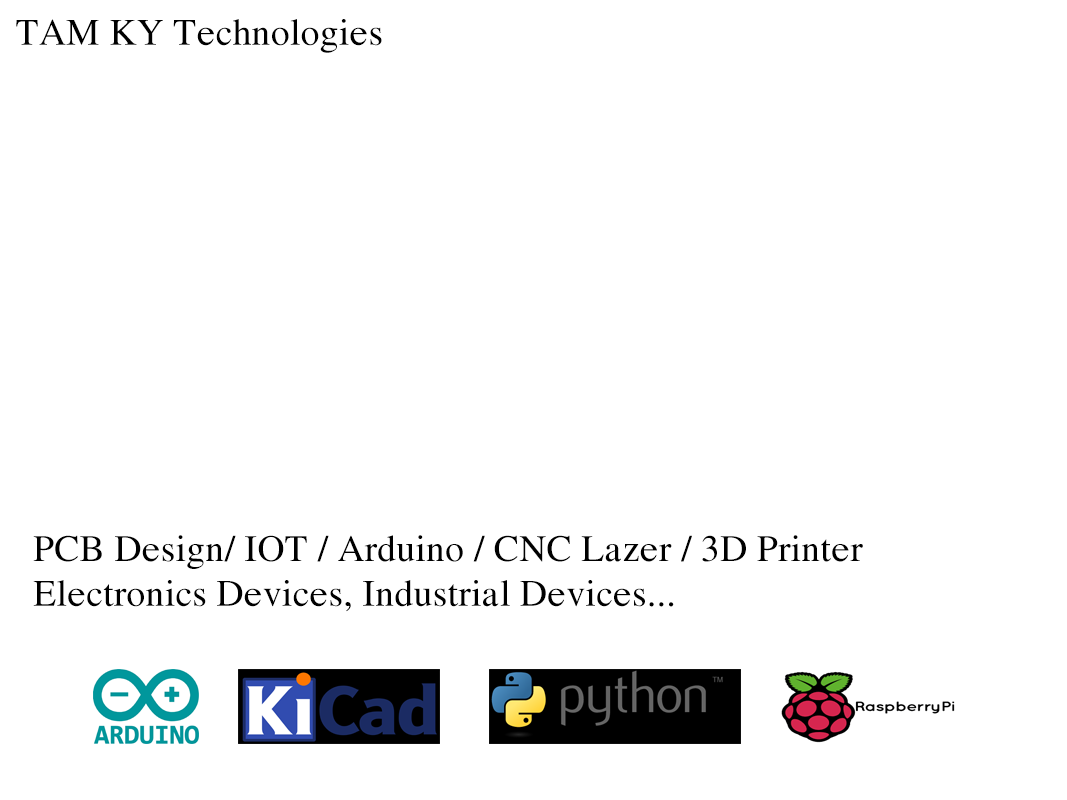
<style>
.page{position:relative;width:1067px;height:800px;background:#ffffff}
.page>*{position:absolute;margin:0}
.t1{font:37.5px "VNI-Times";color:#000000}
</style>
<div class="page">
<p class="t1" style="left:16px;top:19px;width:366px;height:34px">TAM KY Technologies</p>
<p class="t1" style="left:33px;top:535px;width:830px;height:77px">PCB Design/ IOT / Arduino / CNC Lazer / 3D Printer <br>Electronics Devices, Industrial Devices...</p>
</div>
